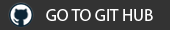
<style>
.page{position:relative;width:170px;height:30px;background:#333333}
.page>*{position:absolute;margin:0}
.t1{font:17px "MyriadPro-Regular";color:#ffffff}
</style>
<div class="page">
<p class="t1" style="left:46px;top:9px;width:107px;height:12px">GO TO GIT HUB</p>
</div>
